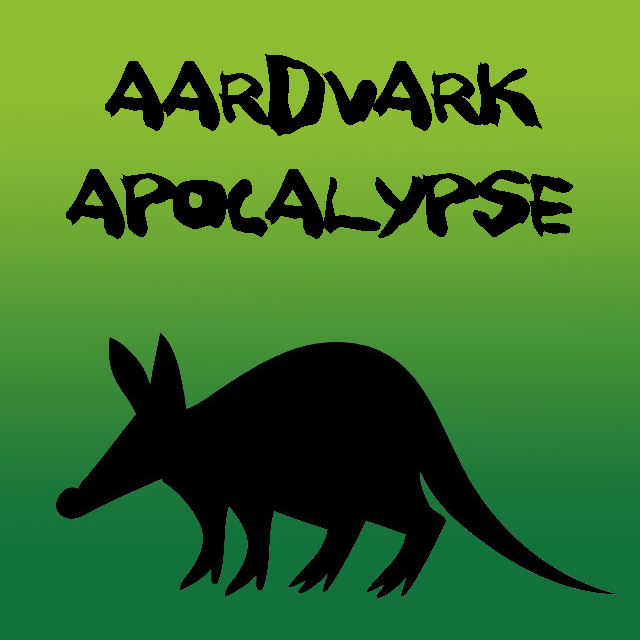
<style>
.page{position:relative;width:640px;height:640px;background:#000000}
.page>*{position:absolute;margin:0}
.t1{font:90px "Squitcher";letter-spacing:0.009em;color:#000000}
</style>
<div class="page">
<p class="t1" style="left:66px;top:54px;width:507px;height:185px;text-align:center">AARDVARK<br>APOCALYPSE</p>
</div>
